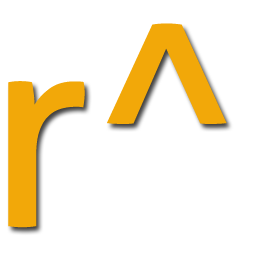
<style>
.page{position:relative;width:256px;height:256px;background:#ffffff}
.page>*{position:absolute;margin:0}
.t1{font:280px "Aller";color:#f2a809}
</style>
<div class="page">
<p class="t1" style="left:8px;top:23px;width:219px;height:205px">r^</p>
</div>
